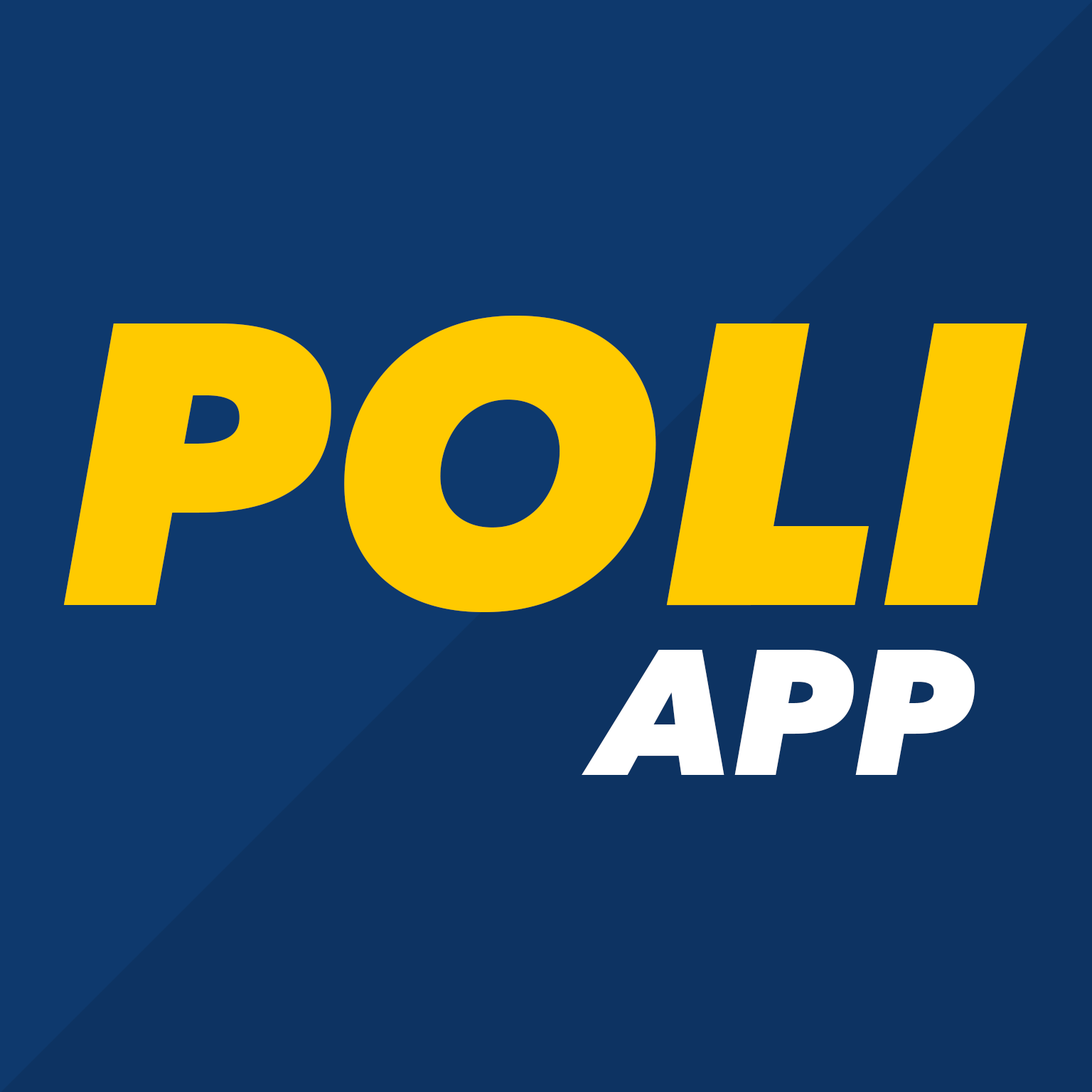
<style>
.page{position:relative;width:1092px;height:1092px;background:#0e396d}
.page>*{position:absolute;margin:0}
.t1{font:398.2px "AvenirNext-HeavyItalic";color:#ffca00}
.t2{font:177.1px "AvenirNext-HeavyItalic";color:#ffffff}
</style>
<div class="page">
<p class="t1" style="left:63px;top:316px;width:964px;height:296px">POLI</p>
<p class="t2" style="left:582px;top:650px;width:393px;height:125px">APP</p>
</div>
